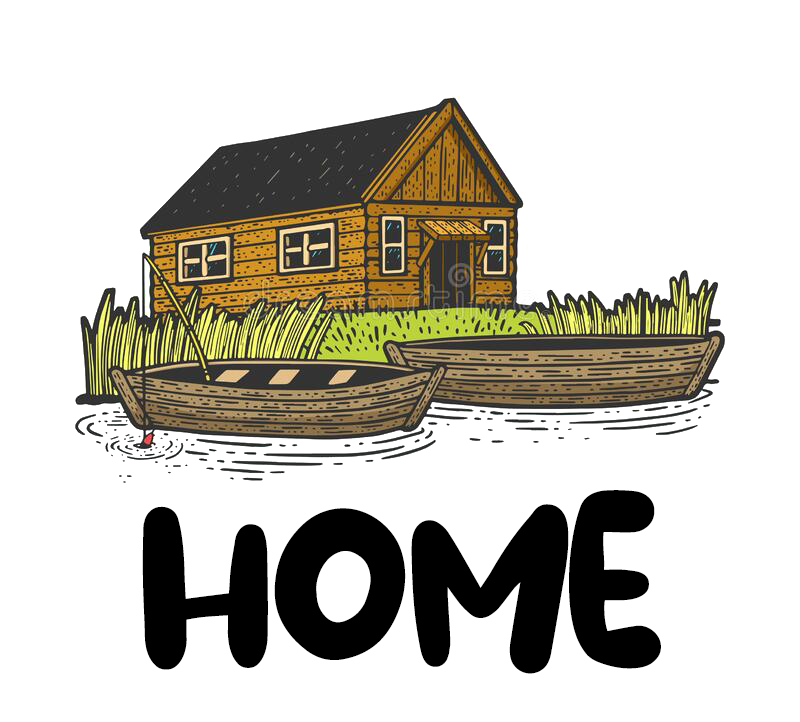
<style>
.page{position:relative;width:800px;height:722px;background:#ffffff}
.page>*{position:absolute;margin:0}
.t1{font:200px "Water-Galon";color:#000000}
.t2{font:72px "Tahoma";color:#585858}
</style>
<div class="page">
<p class="t1" style="left:142px;top:490px;width:519px;height:184px"><span class="t2">    </span>HOME</p>
</div>
